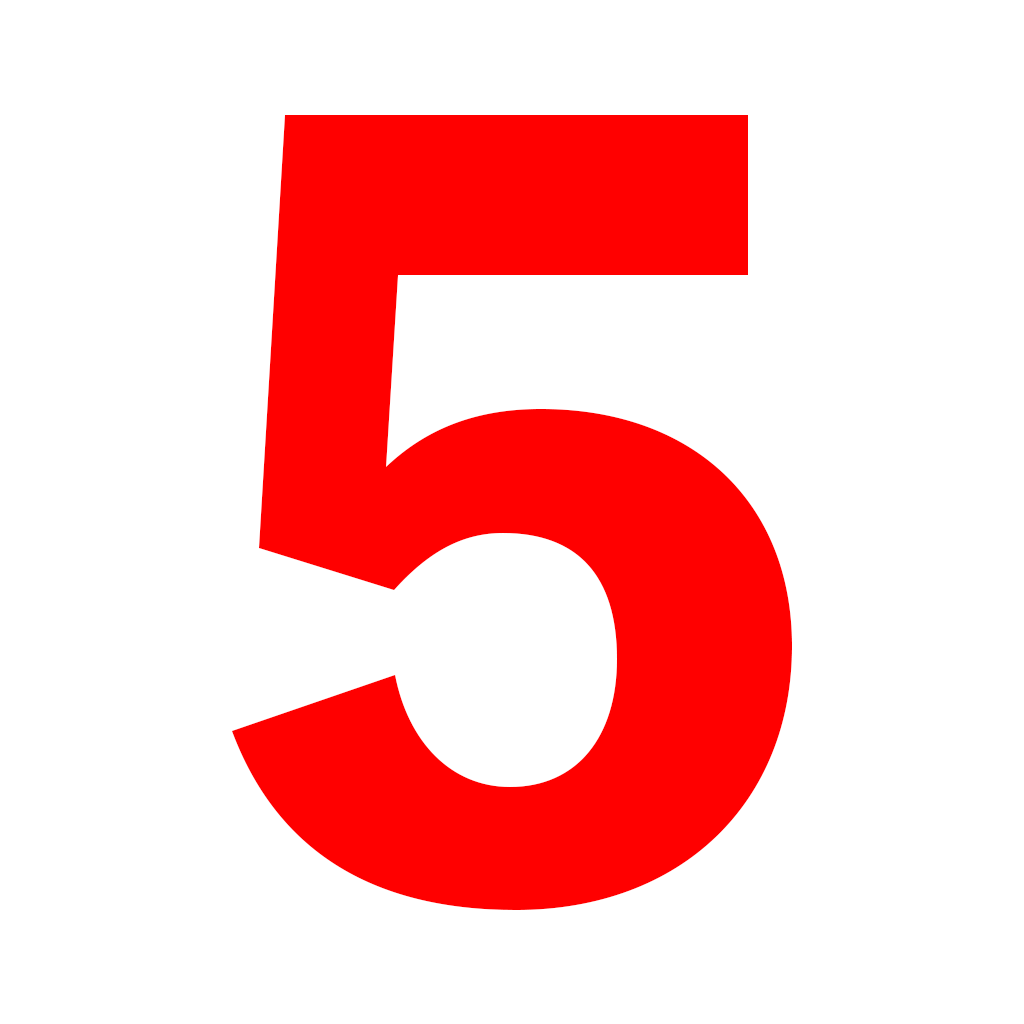
<style>
.page{position:relative;width:1024px;height:1024px;background:#ffffff}
.page>*{position:absolute;margin:0}
.t1{font:1000px "ToppanBunkyuMidashiGothicStdN-ExtraBold";color:#ff0000}
</style>
<div class="page">
<p class="t1" style="left:232px;top:115px;width:560px;height:795px">5</p>
</div>
